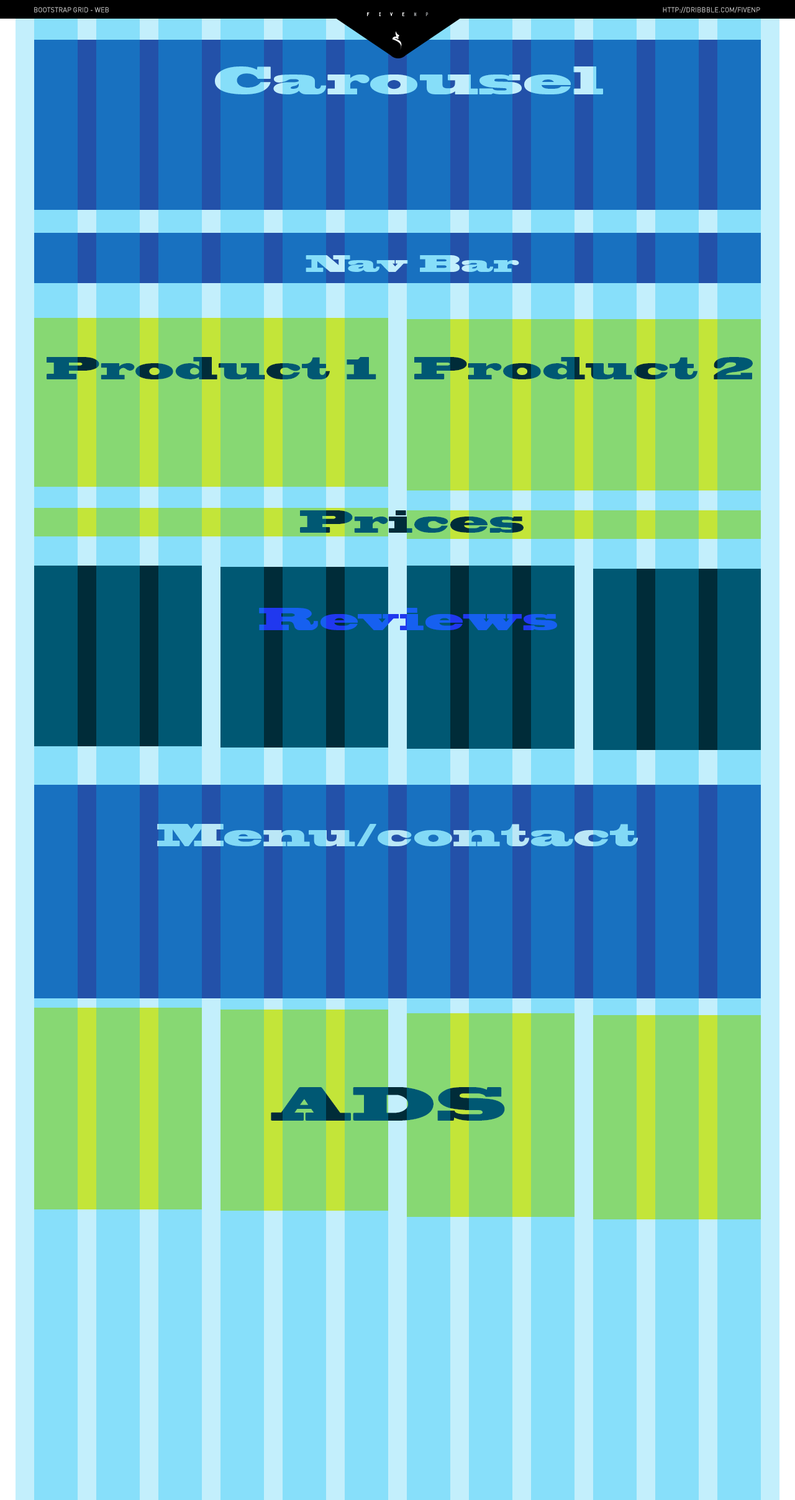
<style>
.page{position:relative;width:795px;height:1500px}
.page>*{position:absolute;margin:0}
.t1{font:37.3px "BlackoakStd"}
.t2{font:22.4px "BlackoakStd"}
.t3{font:29.8px "BlackoakStd";color:#015873}
.t4{font:29.8px "BlackoakStd";color:#005873}
.t5{font:29.8px "BlackoakStd"}
.t6{font:29.8px "BlackoakStd";color:#1660f0}
.t7{font:44.7px "BlackoakStd";color:#005873}
</style>
<div class="page">
<p class="t1" style="left:215px;top:66px;width:388px;height:28px">Carousel</p>
<p class="t2" style="left:306px;top:255px;width:213px;height:17px">Nav Bar</p>
<p class="t3" style="left:47px;top:357px;width:329px;height:22px">Product 1</p>
<p class="t4" style="left:414px;top:357px;width:339px;height:22px">Product 2</p>
<p class="t5" style="left:300px;top:510px;width:223px;height:23px">Prices</p>
<p class="t6" style="left:259px;top:608px;width:298px;height:22px">Reviews</p>
<p class="t5" style="left:157px;top:824px;width:481px;height:22px">Menu/contact</p>
<p class="t7" style="left:271px;top:1087px;width:234px;height:34px">ADS</p>
</div>
